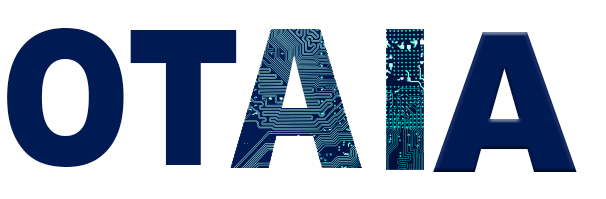
<style>
.page{position:relative;width:606px;height:199px;background:#ffffff}
.page>*{position:absolute;margin:0}
.t1{font:188.9px "Arial-Black";color:#001a54;scale:0.83 1}
.t2{font:196.5px "Arial-Black";color:#001a54;scale:0.93 1}
</style>
<div class="page">
<p class="t1" style="left:7px;top:28px;width:230px;height:139px">OT</p>
<p class="t2" style="left:433px;top:32px;width:144px;height:140px">A</p>
</div>
